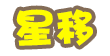
<style>
.page{position:relative;width:110px;height:56px;background:#ffffff}
.page>*{position:absolute;margin:0}
.t1{font:40px "DFPHaiBaoW12";letter-spacing:-0.005em;color:#fffc00}
</style>
<div class="page">
<p class="t1" style="left:16px;top:9px;width:77px;height:37px">星移</p>
</div>
